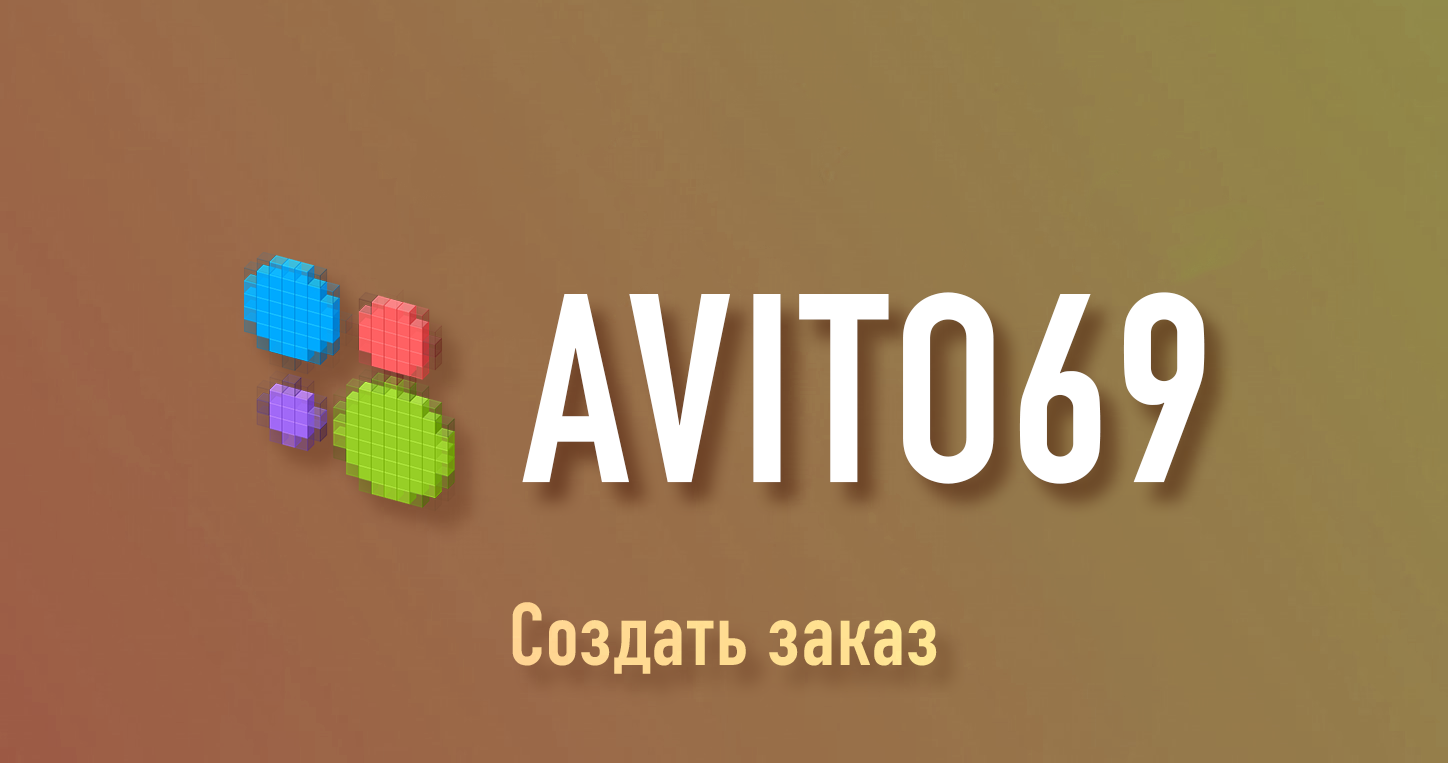
<style>
.page{position:relative;width:1448px;height:763px}
.page>*{position:absolute;margin:0}
.t1{font:264px "DINCondensed-Bold";letter-spacing:0.025em;color:#ffffff}
.t2{font:87.5px "DINCondensed-Bold";letter-spacing:0.025em;color:#ffdc92}
</style>
<div class="page">
<p class="t1" style="left:522px;top:292px;width:683px;height:192px">AVITO69</p>
<p class="t2" style="left:512px;top:602px;width:425px;height:72px">Создать заказ</p>
</div>
